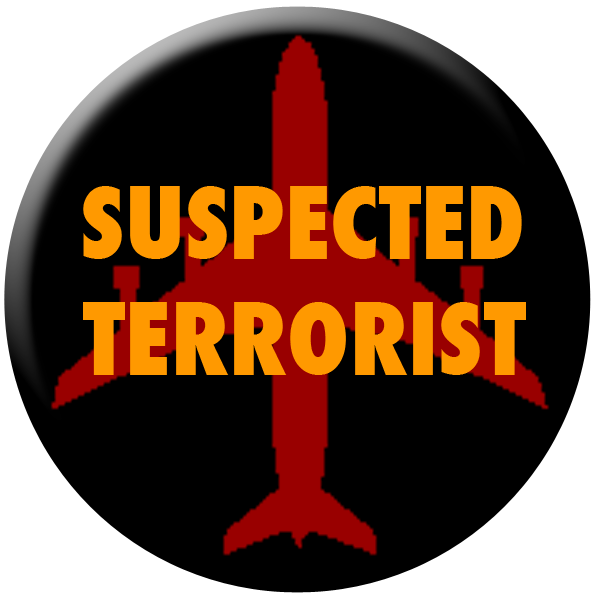
<style>
.page{position:relative;width:600px;height:600px;background:#000000}
.page>*{position:absolute;margin:0}
.t1{font:97.3px "Futura-CondensedExtraBold";color:#ff9900}
</style>
<div class="page">
<p class="t1" style="left:83px;top:186px;width:443px;height:189px;text-align:center">SUSPECTED<br>TERRORIST</p>
</div>
